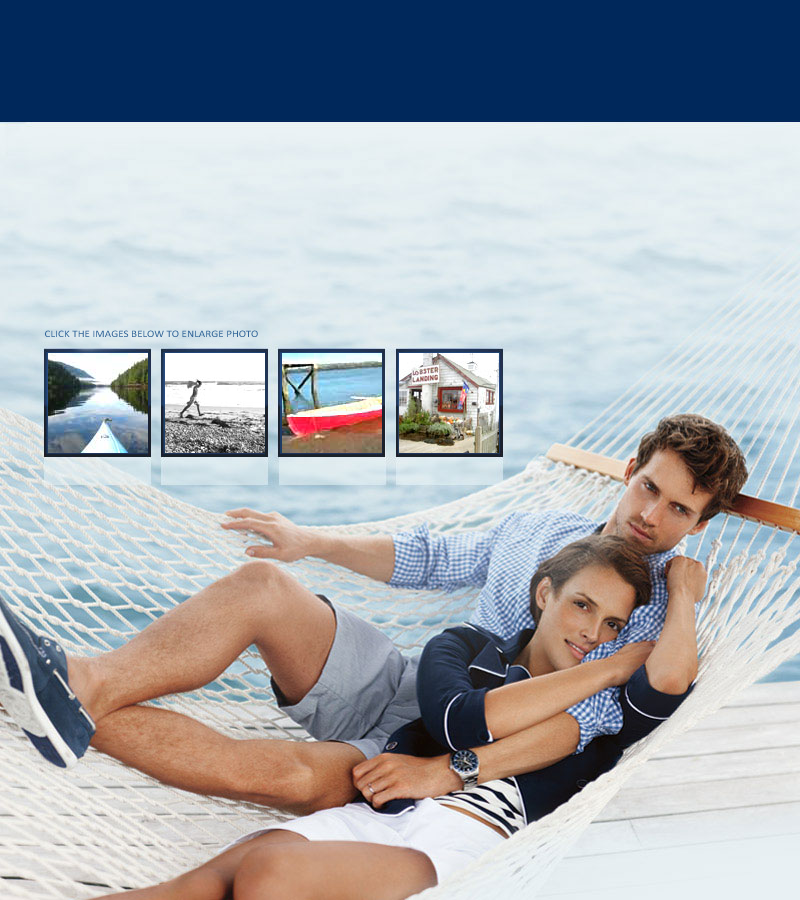
<style>
.page{position:relative;width:800px;height:900px}
.page>*{position:absolute;margin:0}
.t1{font:10px "Calibri";letter-spacing:0.005em;color:#336699;scale:1.1 1}
</style>
<div class="page">
<p class="t1" style="left:45px;top:330px;width:213px;height:7px">CLICK THE IMAGES BELOW TO ENLARGE PHOTO</p>
</div>
